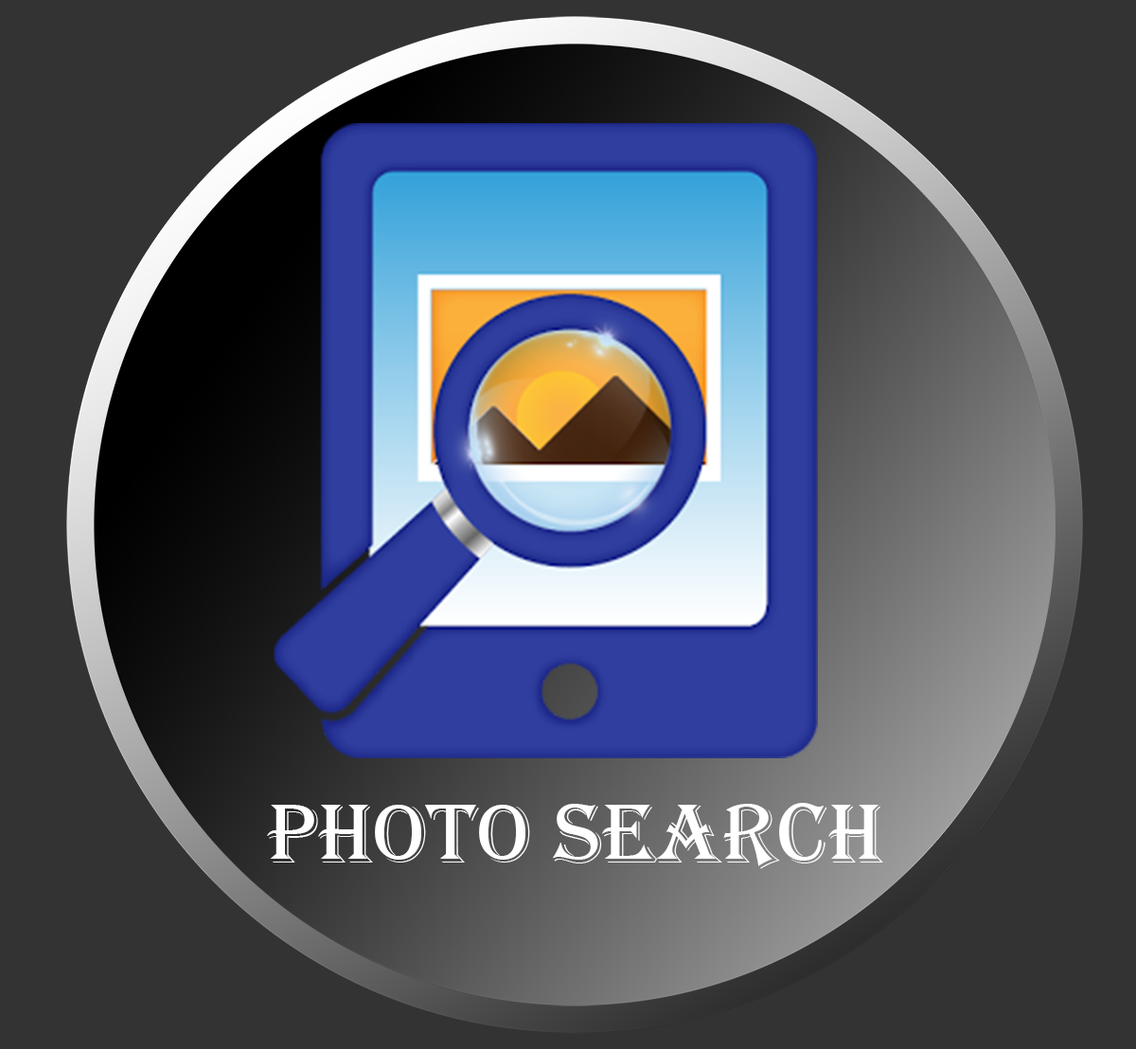
<style>
.page{position:relative;width:1136px;height:1049px;background:#333333}
.page>*{position:absolute;margin:0}
.t1{font:87.1px "Algerian";color:#ffffff}
</style>
<div class="page">
<p class="t1" style="left:267px;top:803px;width:617px;height:66px">photo search</p>
</div>
